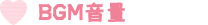
<style>
.page{position:relative;width:208px;height:25px;background:#ffffff}
.page>*{position:absolute;margin:0}
.t1{font:21.2px "shetumodengxiaofangti";color:#ef8299;font-weight:bold}
</style>
<div class="page">
<p class="t1" style="left:38px;top:2px;width:87px;height:20px">BGM音量</p>
</div>
